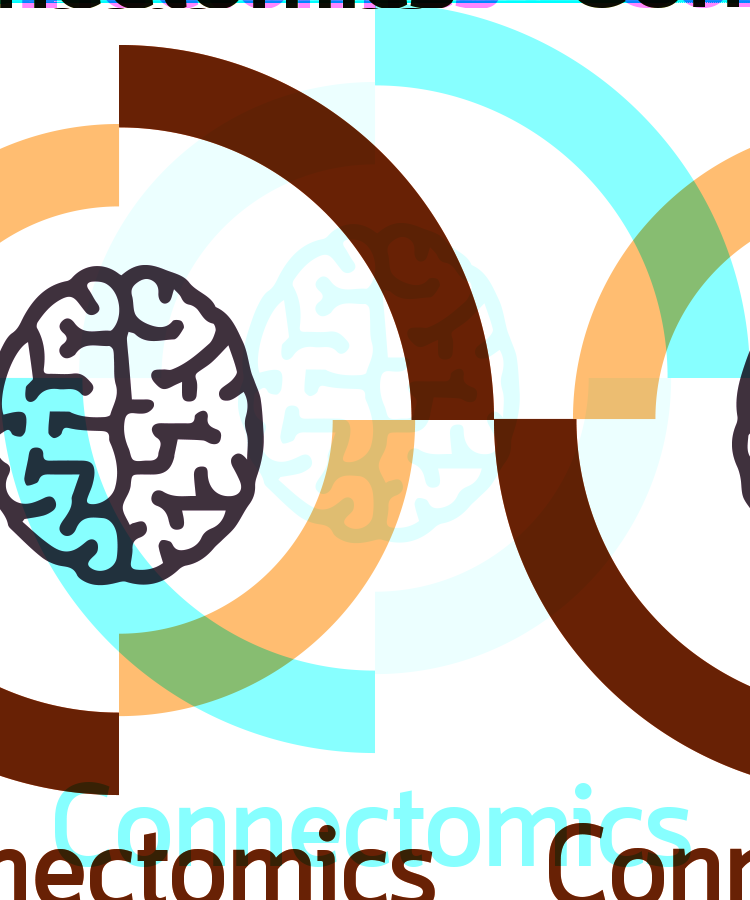
<style>
.page{position:relative;width:750px;height:900px;background:#ffffff}
.page>*{position:absolute;margin:0}
.t1{font:116.7px "Quark-Bold"}
</style>
<div class="page">
<p class="t1" style="left:55px;top:779px;width:636px;height:85px">Connectomics</p>
</div>
